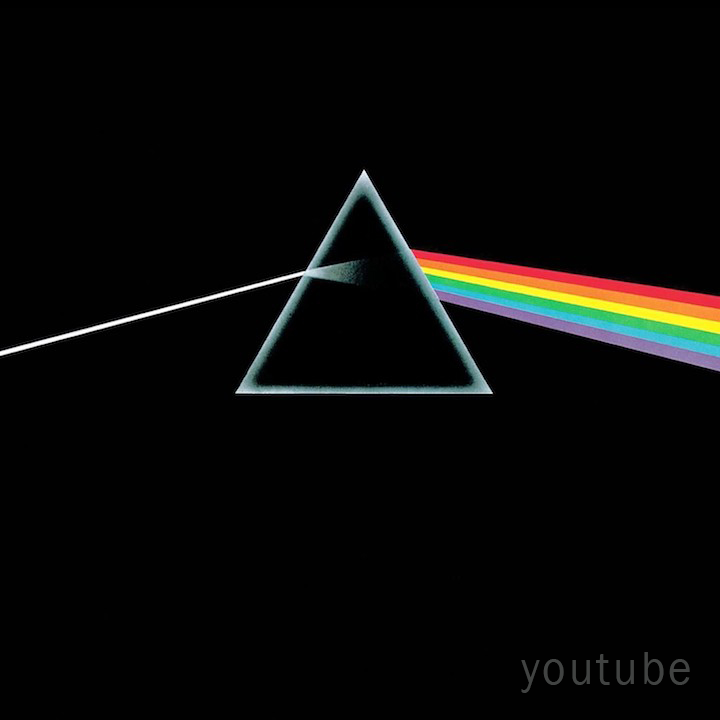
<style>
.page{position:relative;width:720px;height:720px;background:#010101}
.page>*{position:absolute;margin:0}
.t1{font:48px "FranklinGothic-Book";letter-spacing:0.075em;color:#414342;scale:0.93 1}
</style>
<div class="page">
<p class="t1" style="left:521px;top:652px;width:169px;height:41px">youtube</p>
</div>
